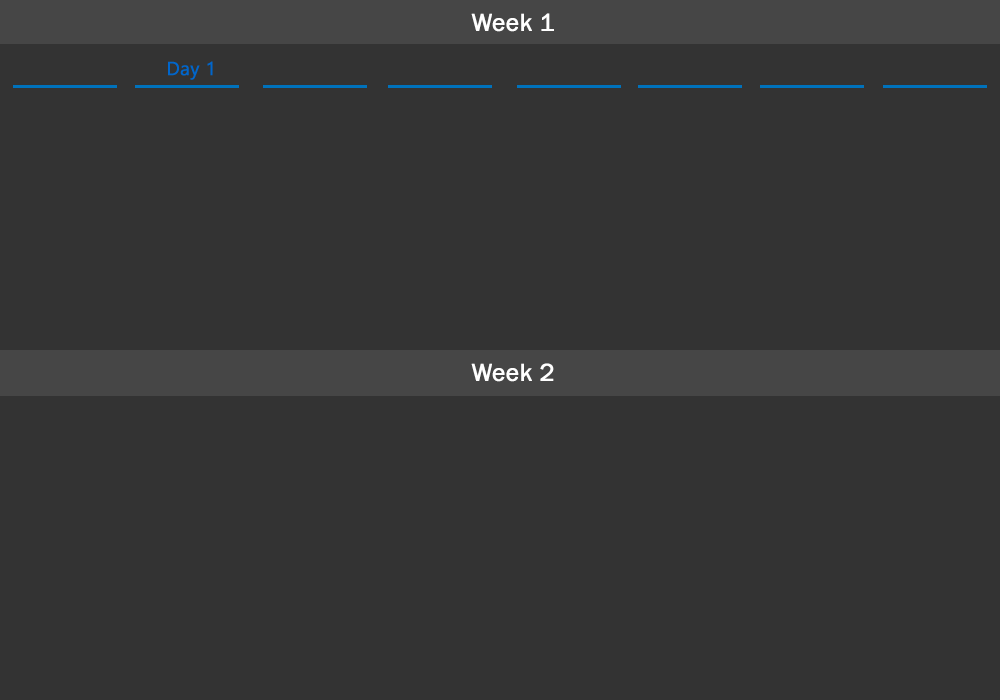
<style>
.page{position:relative;width:1000px;height:700px;background:#333333}
.page>*{position:absolute;margin:0}
.t1{font:25px "FranklinGothic-Book";color:#ffffff;font-weight:bold}
.t2{font:18.8px "Gadugi";color:#0066cc;font-weight:bold}
</style>
<div class="page">
<p class="t1" style="left:471px;top:13px;width:83px;height:19px">Week 1</p>
<p class="t2" style="left:168px;top:61px;width:45px;height:19px">Day 1</p>
<p class="t1" style="left:471px;top:363px;width:83px;height:19px">Week 2</p>
</div>
